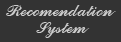
<style>
.page{position:relative;width:121px;height:42px;background:#333333}
.page>*{position:absolute;margin:0}
.t1{font:18px "CommercialScriptBT-Regular";color:#cccccc}
</style>
<div class="page">
<p class="t1" style="left:6px;top:5px;width:110px;height:11px">Recomendation</p>
<p class="t1" style="left:36px;top:22px;width:54px;height:16px">System</p>
</div>
